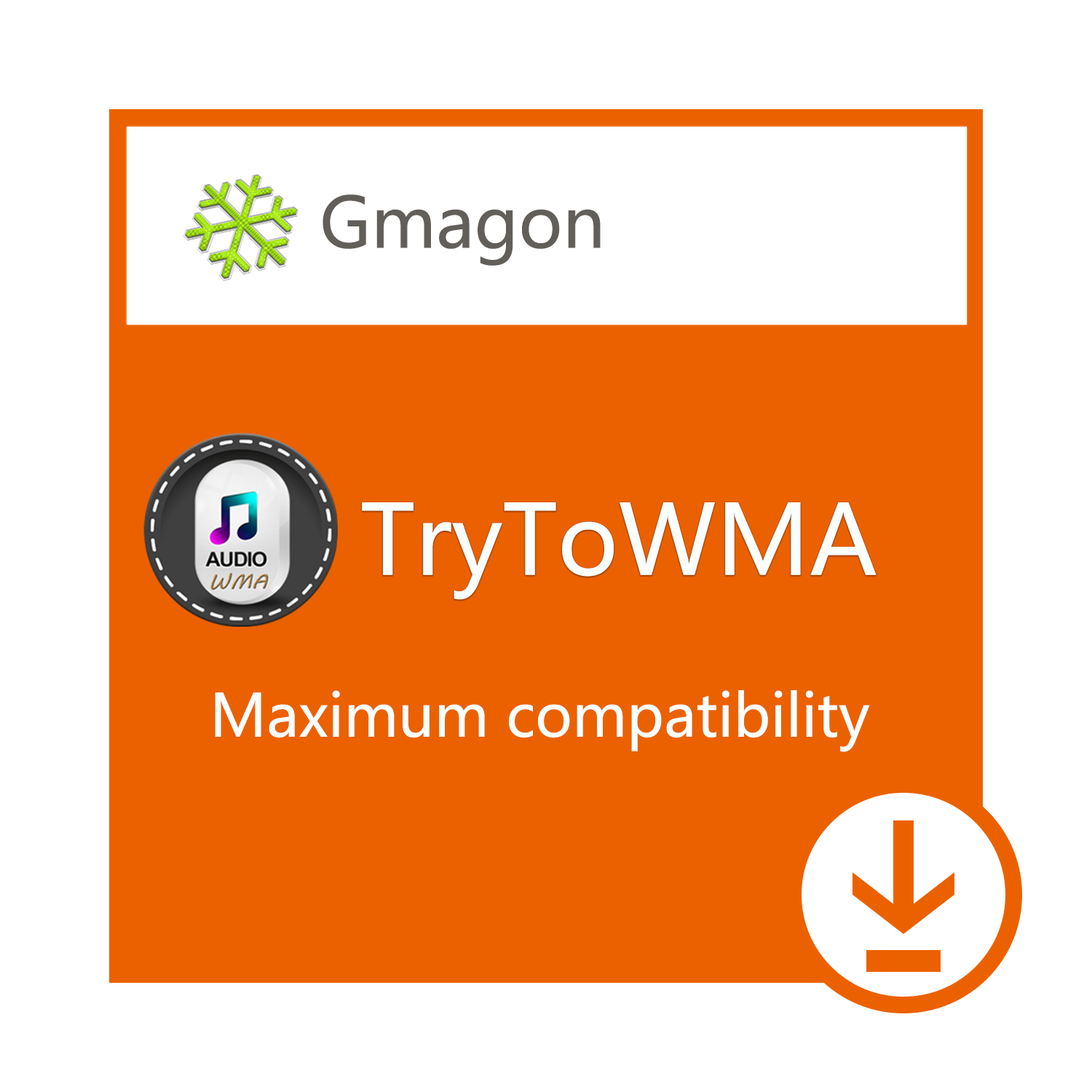
<style>
.page{position:relative;width:1092px;height:1092px;background:#ffffff}
.page>*{position:absolute;margin:0}
.t1{font:69.3px "MicrosoftYaHei";color:#625e59}
.t2{font:95.9px "MicrosoftYaHei";color:#fafffd}
.t3{font:58.2px "MicrosoftYaHei";color:#fafffd}
</style>
<div class="page">
<p class="t1" style="left:322px;top:194px;width:279px;height:72px">Gmagon</p>
<p class="t2" style="left:362px;top:502px;width:515px;height:98px">TryToWMA</p>
<p class="t3" style="left:215px;top:690px;width:655px;height:62px">Maximum compatibility</p>
</div>
